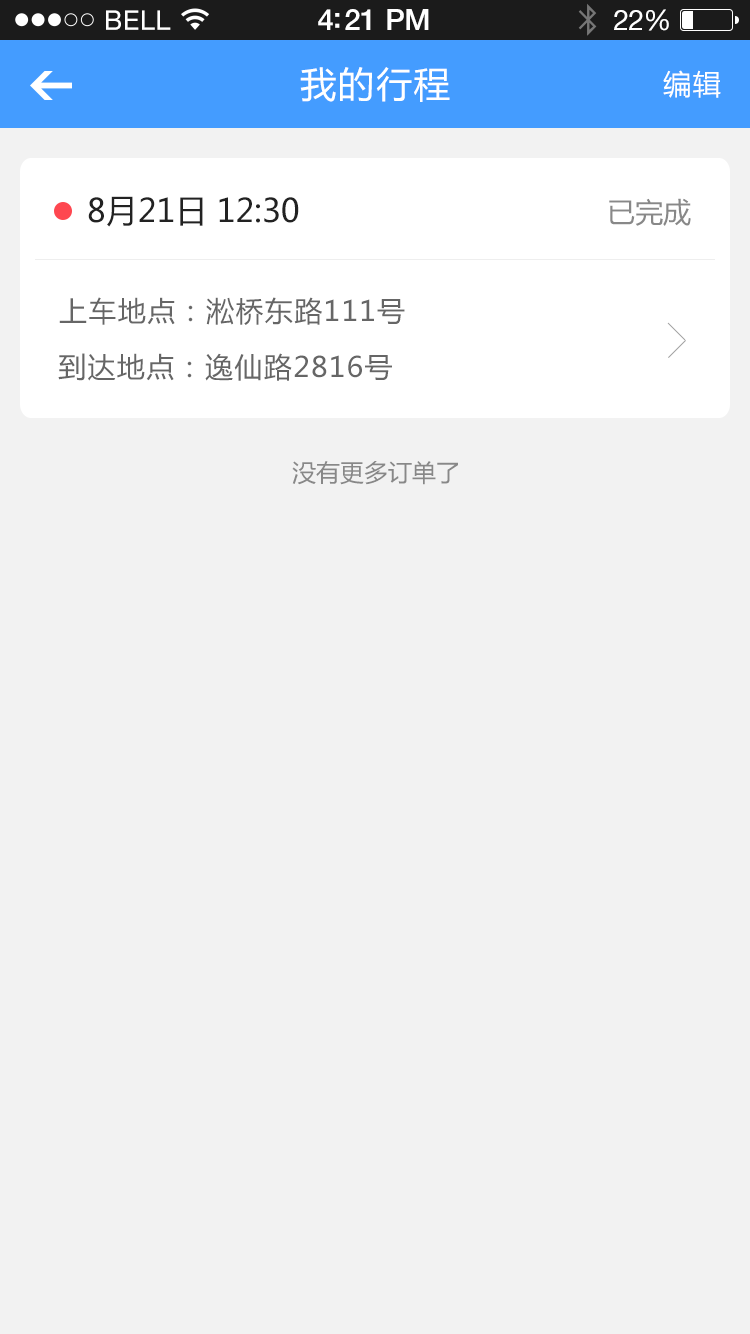
<style>
.page{position:relative;width:750px;height:1334px;background:#f2f2f2}
.page>*{position:absolute;margin:0}
.t1{font:36px "MicrosoftYaHei";letter-spacing:0.05em;color:#ffffff}
.t2{font:28px "MicrosoftYaHei";letter-spacing:0.05em;color:#ffffff}
.t3{font:32px "MicrosoftYaHei";color:#222222}
.t4{font:28px "MicrosoftYaHei";color:#888888}
.t5{font:28px "MicrosoftYaHei";letter-spacing:0.05em;color:#666666}
.t6{font:24px "MicrosoftYaHei";color:#888888}
</style>
<div class="page">
<p class="t1" style="left:300px;top:67px;width:150px;height:35px">我的行程</p>
<p class="t2" style="left:663px;top:70px;width:58px;height:28px">编辑</p>
<p class="t3" style="left:88px;top:196px;width:211px;height:31px">8月21日 12:30</p>
<p class="t4" style="left:609px;top:198px;width:82px;height:28px">已完成</p>
<p class="t5" style="left:59px;top:297px;width:346px;height:28px">上车地点：淞桥东路111号</p>
<p class="t5" style="left:58px;top:353px;width:334px;height:28px">到达地点：逸仙路2816号</p>
<p class="t6" style="left:292px;top:461px;width:166px;height:24px">没有更多订单了</p>
</div>
